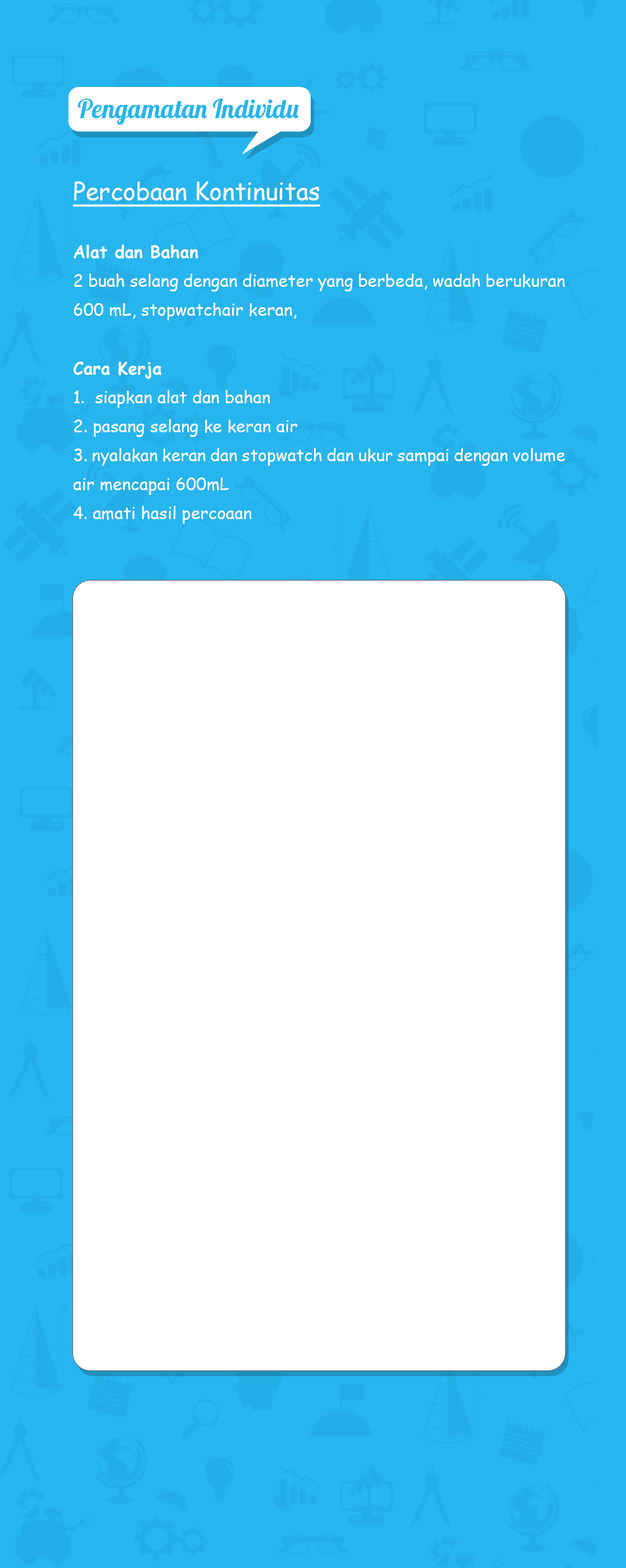
<style>
.page{position:relative;width:626px;height:1568px;background:#27b5ef}
.page>*{position:absolute;margin:0}
.t1{font:25.8px "Lobster-Regular";color:#27b5ef}
.t2{font:16.9px/29px "ComicSansMS";color:#ffffff}
.t3{font:24.2px/29px "ComicSansMS";color:#ffffff;text-decoration:underline}
.t4{font:16.9px/29px "ComicSansMS-Bold";color:#ffffff}
</style>
<div class="page">
<p class="t1" style="left:78px;top:99px;width:221px;height:26px">Pengamatan Individu</p>
<p class="t2" style="left:72px;top:181px;width:493px;height:343px;text-align:justify"><span class="t3">Percobaan Kontinuitas<br><br></span><span class="t4">Alat dan Bahan <br></span>2 buah selang dengan diameter yang berbeda, wadah berukuran 600 mL, stopwatchair keran, <br><br><span class="t4">Cara Kerja<br></span>1.  siapkan alat dan bahan<br>2. pasang selang ke keran air<br>3. nyalakan keran dan stopwatch dan ukur sampai dengan volume air mencapai 600mL<br>4. amati hasil percoaan</p>
</div>
